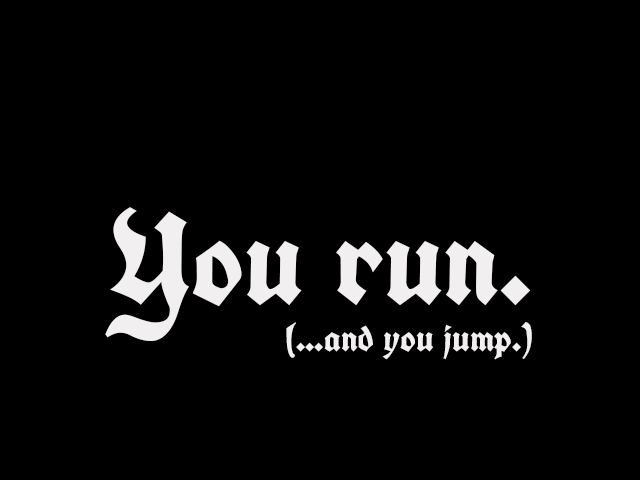
<style>
.page{position:relative;width:640px;height:480px;background:#000000}
.page>*{position:absolute;margin:0}
.t1{font:37.5px "UnifrakturCook";color:#f1efef}
.t2{font:125px "UnifrakturCook";color:#f1efef}
</style>
<div class="page">
<p class="t1" style="left:105px;top:207px;width:427px;height:153px;text-align:center"><span class="t2">You run.<br></span>(...and you jump.)</p>
</div>
